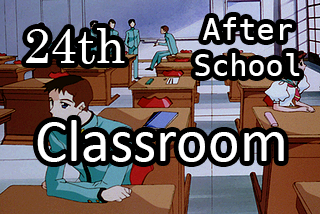
<style>
.page{position:relative;width:320px;height:214px}
.page>*{position:absolute;margin:0}
.t1{font:30px "DejaVuSansMono";color:#ffffff}
.t2{font:40px "Calibri";color:#ffffff}
.t3{font:48px "Century";color:#ffffff}
.t4{font:60px "Calibri";color:#ffffff}
</style>
<div class="page">
<p class="t1" style="left:195px;top:17px;width:105px;height:59px"><span class="t2"> </span>After<br>School</p>
<p class="t3" style="left:26px;top:28px;width:99px;height:36px">24th</p>
<p class="t4" style="left:37px;top:120px;width:247px;height:42px">Classroom</p>
</div>
